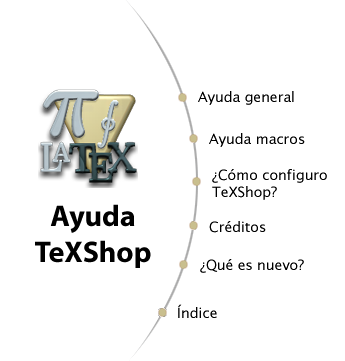
<style>
.page{position:relative;width:345px;height:361px;background:#ffffff}
.page>*{position:absolute;margin:0}
.t1{font:14px "LucidaGrande";color:#000000}
.t2{font:30px "MyriadPro-Bold";color:#000000}
</style>
<div class="page">
<p class="t1" style="left:198px;top:91px;width:96px;height:14px">Ayuda general</p>
<p class="t1" style="left:209px;top:133px;width:96px;height:14px">Ayuda macros</p>
<p class="t1" style="left:212px;top:169px;width:115px;height:31px">¿Cómo configuro<br>TeXShop?</p>
<p class="t2" style="left:35px;top:204px;width:116px;height:64px;text-align:center">Ayuda<br>TeXShop</p>
<p class="t1" style="left:209px;top:221px;width:57px;height:12px">Créditos</p>
<p class="t1" style="left:200px;top:259px;width:104px;height:14px">¿Qué es nuevo?</p>
<p class="t1" style="left:178px;top:304px;width:39px;height:14px">Índice</p>
</div>
